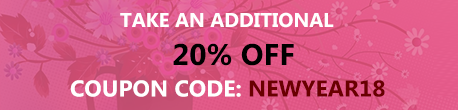
<style>
.page{position:relative;width:458px;height:110px}
.page>*{position:absolute;margin:0}
.t1{font:20px "MicrosoftPhagsPa-Bold";color:#ffffff}
.t2{font:30px "MicrosoftPhagsPa-Bold";color:#000000}
</style>
<div class="page">
<p class="t1" style="left:120px;top:12px;width:214px;height:16px">TAKE AN ADDITIONAL</p>
<p class="t2" style="left:173px;top:43px;width:121px;height:23px">20% OFF</p>
</div>
